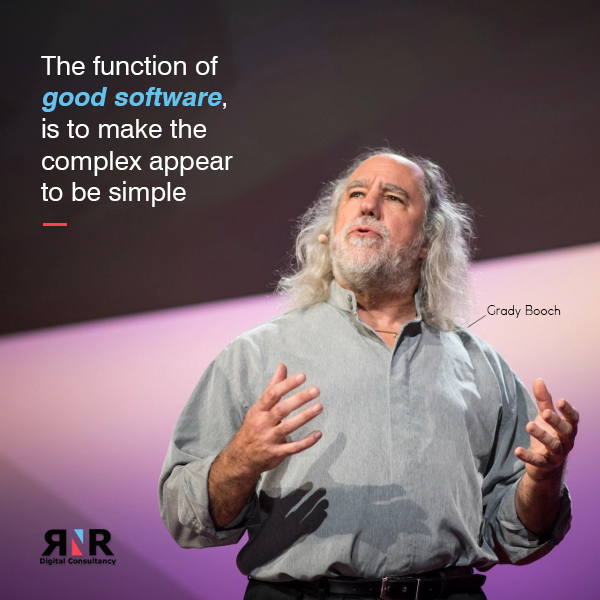
<style>
.page{position:relative;width:600px;height:600px}
.page>*{position:absolute;margin:0}
.t1{font:26.5px/31.7px "Swiss721BT-Roman";letter-spacing:0.001em;color:#ffffff}
.t2{font:26.5px/31.7px "Swiss721BT-Bold";letter-spacing:0.001em;color:#64c2ec;font-style:italic}
.t3{font:12.6px "CocoGothic-Light";letter-spacing:0.001em;color:#000000}
.t4{font:12.6px "CocoGothic-Light";letter-spacing:0.001em;color:#000000;font-style:italic}
</style>
<div class="page">
<p class="t1" style="left:41px;top:55px;width:192px;height:152px">The function of <br><span class="t2">good software</span>,  <br>is to make the<br>complex appear<br>to be simple</p>
<p class="t3" style="left:487px;top:305px;width:74px;height:13px"><span class="t4"> </span>Grady Booch</p>
</div>
